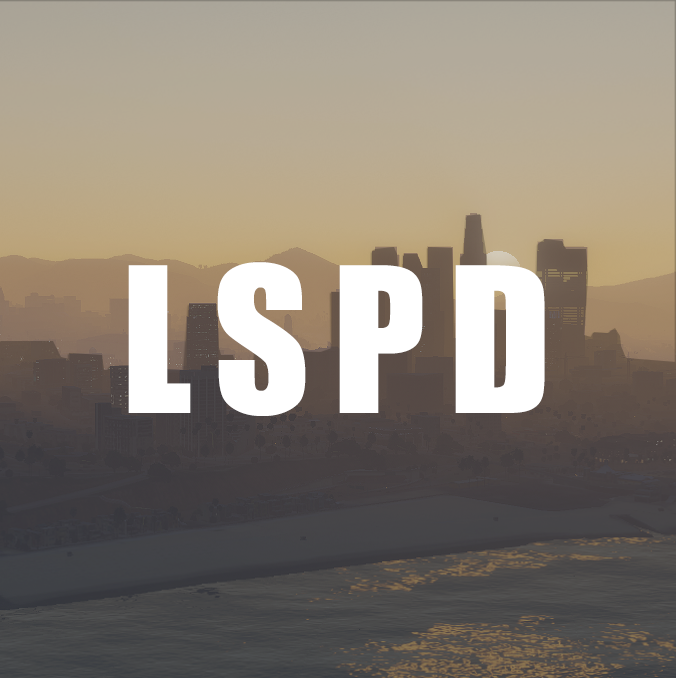
<style>
.page{position:relative;width:676px;height:678px}
.page>*{position:absolute;margin:0}
.t1{font:186.7px "Impact";letter-spacing:0.12em;color:#ffffff}
</style>
<div class="page">
<p class="t1" style="left:128px;top:262px;width:417px;height:154px">LSPD</p>
</div>
